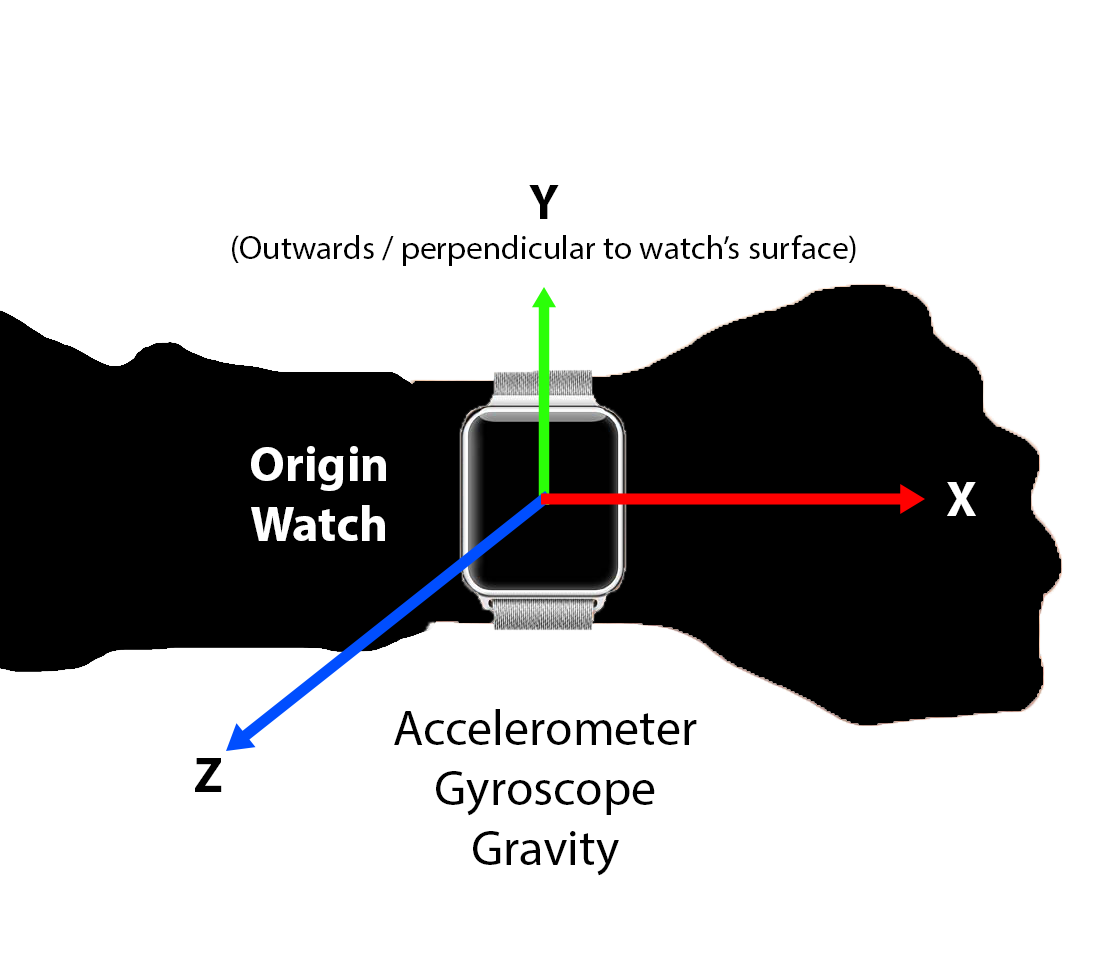
<style>
.page{position:relative;width:1100px;height:978px;background:#ffffff}
.page>*{position:absolute;margin:0}
.t1{font:33.3px "MyriadPro-Regular";color:#000000}
.t2{font:50px "MyriadPro-Bold";color:#000000}
.t3{font:50px "MyriadPro-Bold";color:#ffffff}
.t4{font:50px "MyriadPro-Regular";color:#000000}
</style>
<div class="page">
<p class="t1" style="left:232px;top:185px;width:624px;height:81px;text-align:center"><span class="t2">Y<br></span>(Outwards / perpendicular to watch’s surface)</p>
<p class="t3" style="left:251px;top:446px;width:135px;height:95px;text-align:center">Origin<br>Watch</p>
<p class="t3" style="left:947px;top:482px;width:29px;height:34px">X</p>
<p class="t4" style="left:394px;top:709px;width:303px;height:167px;text-align:center">Accelerometer<br>Gyroscope<br>Gravity</p>
<p class="t2" style="left:195px;top:758px;width:27px;height:34px">Z</p>
</div>
